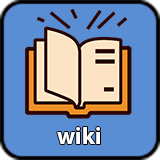
<style>
.page{position:relative;width:160px;height:160px;background:#598ed5}
.page>*{position:absolute;margin:0}
.t1{font:24px "MyriadPro-Bold";color:#ffffff}
</style>
<div class="page">
<p class="t1" style="left:57px;top:127px;width:43px;height:17px">wiki</p>
</div>
